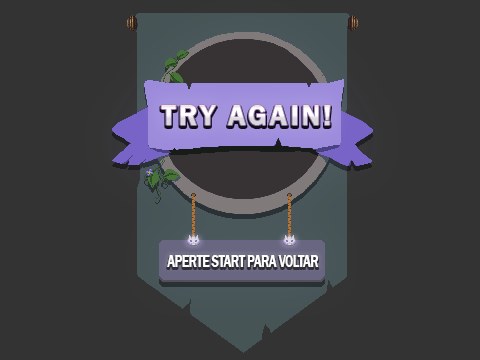
<style>
.page{position:relative;width:480px;height:360px;background:#333333}
.page>*{position:absolute;margin:0}
.t1{font:29px "FranklinGothic-Demi";letter-spacing:0.1em;color:#ffffff}
.t2{font:16.9px "FranklinGothic-Demi";letter-spacing:-0.05em;color:#ffffff;scale:0.77 1}
</style>
<div class="page">
<p class="t1" style="left:161px;top:105px;width:169px;height:20px">TRY AGAIN!</p>
<p class="t2" style="left:167px;top:255px;width:152px;height:12px">APERTE START PARA VOLTAR</p>
</div>
